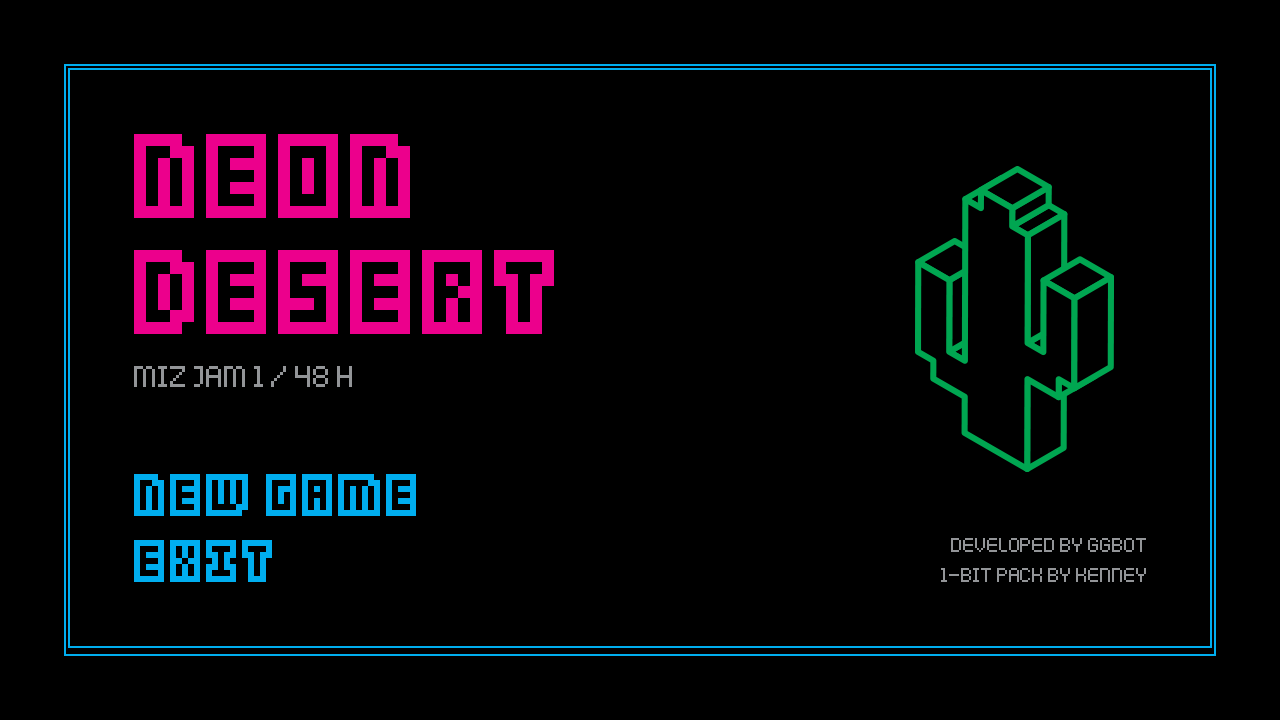
<style>
.page{position:relative;width:1280px;height:720px;background:#000000}
.page>*{position:absolute;margin:0}
.t1{font:96px/116px "Kenney-Blocks";color:#ec008c;text-transform:uppercase}
.t2{font:96px "Kenney-Blocks";color:#ec008c;text-transform:uppercase}
.t3{font:48px "Kenney-Pixel";color:#939598;text-transform:uppercase}
.t4{font:48px "Kenney-Blocks";color:#00aeef;text-transform:uppercase}
.t5{font:48px/66px "Kenney-Blocks";color:#00aeef;text-transform:uppercase}
.t6{font:32px/30px "Kenney-Pixel";color:#939598;text-transform:uppercase}
</style>
<div class="page">
<p class="t1" style="left:134px;top:134px;width:420px;height:200px"><span class="t2">neon<br></span>desert</p>
<p class="t3" style="left:134px;top:366px;width:218px;height:21px">miz jam 1 / 48 h</p>
<p class="t4" style="left:134px;top:474px;width:282px;height:108px">new game<br><span class="t5">exit</span></p>
<p class="t6" style="left:941px;top:538px;width:205px;height:44px;text-align:right">Developed by GGBOT<br>1-Bit Pack by kenney</p>
</div>
